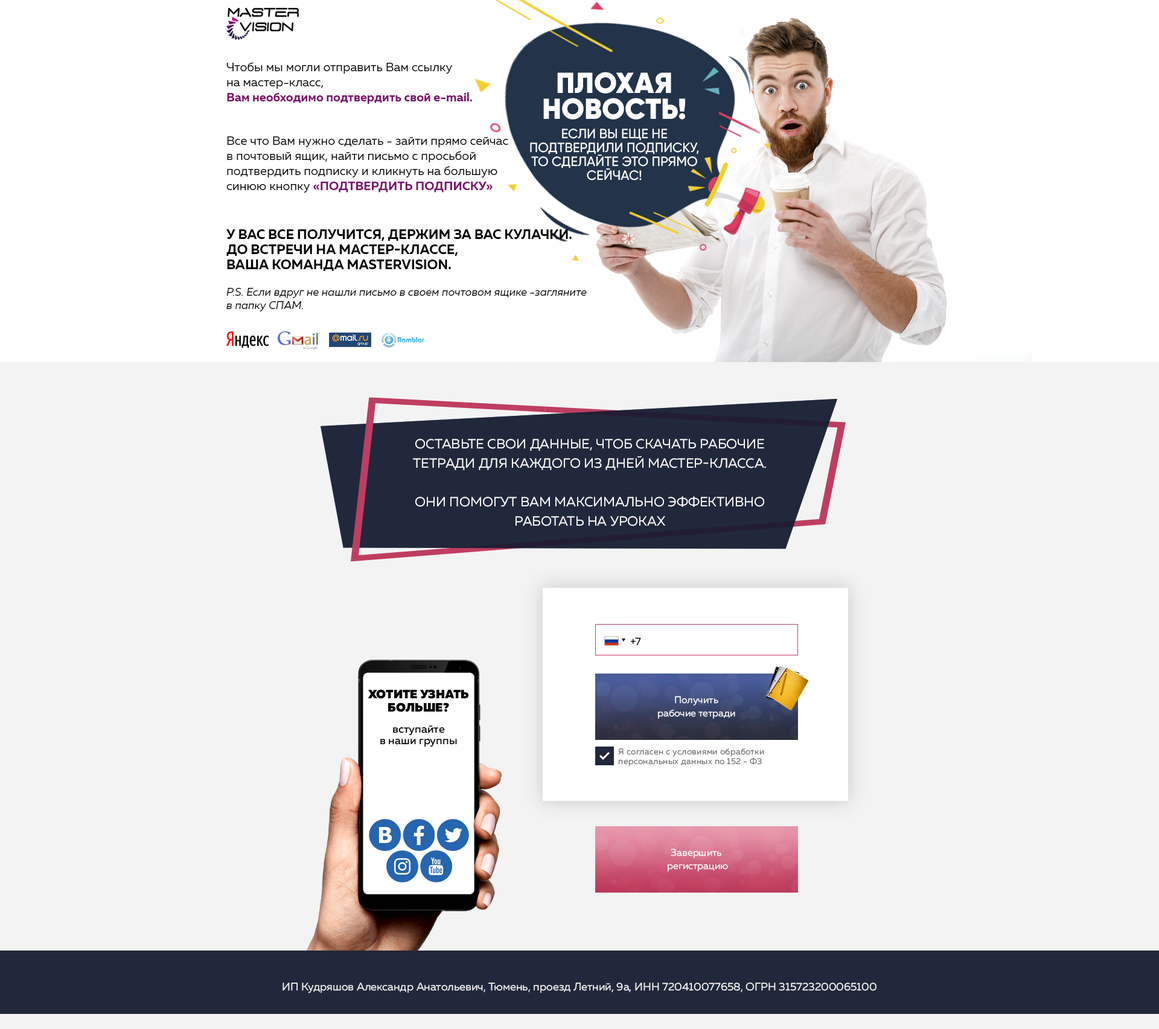
<style>
.page{position:relative;width:1159px;height:1029px;background:#f3f3f3}
.page>*{position:absolute;margin:0}
.t1{font:12.1px/15.1px "Muller-Regular";color:#000000}
.t2{font:12.1px/15.1px "Muller-Bold";color:#7c136c}
.t3{font:13.3px/13.9px "Gilroy-Medium";color:#ffffff;text-transform:uppercase}
.t4{font:29px/26px "Gilroy-Black";color:#ffffff;text-transform:uppercase}
.t5{font:13.3px/19.3px "Gilroy-Medium";color:#ffffff;text-transform:uppercase}
.t6{font:10.9px/13.9px "GothamPro";color:#000000}
.t7{font:13.3px/12.1px "Muller-Bold";color:#000000;text-transform:uppercase}
.t8{font:13.3px/15.1px "Muller-Bold";color:#000000;text-transform:uppercase}
.t9{font:10.9px/13.3px "Muller-RegularItalic";color:#000000}
.t10{font:13.3px/19.3px "MullerRegular";color:#ffffff;text-transform:uppercase}
.t11{font:10.9px "MullerRegular";color:#000000}
.t12{font:12.1px/13.3px "MullerBlack";color:#000000;text-transform:uppercase}
.t13{font:10.9px/21.1px "MullerMedium";color:#000000}
.t14{font:10.9px/11.5px "MullerMedium";color:#000000}
.t15{font:9.7px/13.3px "MullerRegular";color:#ffffff}
.t16{font:8.4px/9.7px "MullerRegular";letter-spacing:0.02em;color:#6f6e6e}
.t17{font:10.9px "MullerRegular";color:#f3f3f3}
</style>
<div class="page">
<p class="t1" style="left:226px;top:62px;width:247px;height:42px">Чтобы мы могли отправить Вам ссылку <br>на мастер-класс, <br><span class="t2">Вам необходимо подтвердить свой e-mail.</span></p>
<p class="t3" style="left:530px;top:72px;width:169px;height:108px;text-align:center"><span class="t4">Плохая <br>новость!<br></span><span class="t5">Если вы еще не</span> подтвердили подписку, то сделайте это прямо сейчас!</p>
<p class="t1" style="left:226px;top:136px;width:361px;height:175px"><span class="t6"><br><br><br></span>Все что Вам нужно сделать - зайти прямо сейчас <br>в почтовый ящик, найти письмо с просьбой <br>подтвердить подписку и кликнуть на большую <br>синюю кнопку <span class="t2">«ПОДТВЕРДИТЬ ПОДПИСКУ»<br><br><br></span><span class="t7">У Вас все получится, держим за Вас кулачки.</span><span class="t8"> <br>До встречи на мастер-классе, <br>Ваша команда MasterVision.<br><br></span><span class="t9">P.S. Если вдруг не нашли письмо в своем почтовом ящике -загляните <br>в папку СПАМ.</span></p>
<p class="t10" style="left:413px;top:439px;width:353px;height:87px;text-align:center">Оставьте свои данные, чтоб скачать рабочие <br>тетради для каждого из дней мастер-класса. <br><br>Они помогут вам максимально эффективно <br>работать на уроках</p>
<p class="t11" style="left:630px;top:637px;width:11px;height:9px">+7</p>
<p class="t12" style="left:368px;top:689px;width:101px;height:58px;text-align:center">Хотите узнать больше?<br><span class="t13">вступайте <br></span><span class="t14">в наши группы</span></p>
<p class="t15" style="left:658px;top:696px;width:77px;height:23px;text-align:center">Получить <br>рабочие тетради</p>
<p class="t16" style="left:618px;top:748px;width:146px;height:18px">Я согласен с условиями обработки <br>персональных данных по 152 - Ф3</p>
<p class="t15" style="left:668px;top:849px;width:60px;height:23px;text-align:center">Завершить<br> регистрацию</p>
<p class="t17" style="left:282px;top:983px;width:594px;height:10px">ИП Кудряшов Александр Анатольевич, Тюмень, проезд Летний, 9а, ИНН 720410077658, ОГРН 315723200065100</p>
</div>
